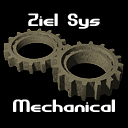
<style>
.page{position:relative;width:128px;height:128px;background:#000000}
.page>*{position:absolute;margin:0}
.t1{font:18px "GravitateBRK";color:#ffffff}
</style>
<div class="page">
<p class="t1" style="left:28px;top:13px;width:72px;height:16px">Ziel Sys</p>
<p class="t1" style="left:13px;top:99px;width:102px;height:13px">Mechanical</p>
</div>
